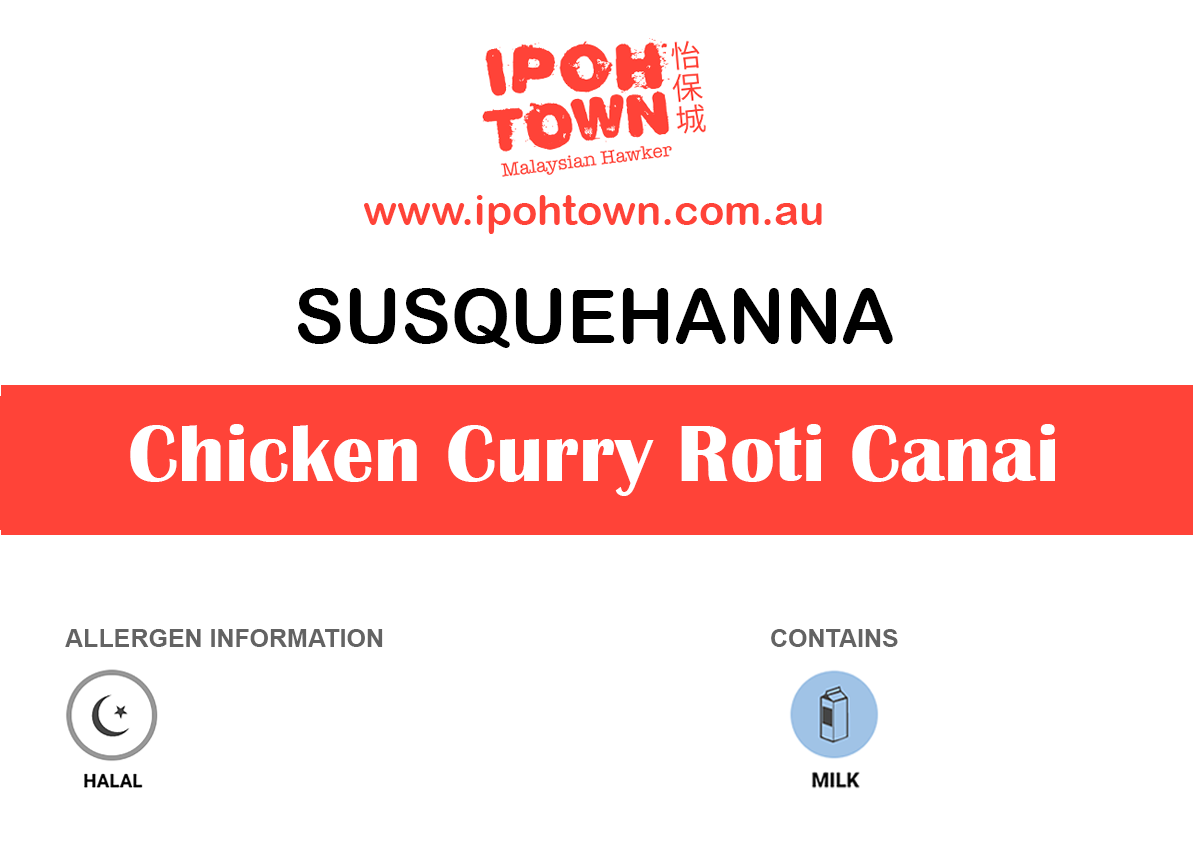
<style>
.page{position:relative;width:1193px;height:850px;background:#ffffff}
.page>*{position:absolute;margin:0}
.t1{font:41.7px "ArialRoundedMTBold";color:#ff4338}
.t2{font:75px "ArialRoundedMTBold";color:#000000}
.t3{font:83.3px "BritannicBold";color:#ffffff}
.t4{font:25px "Arial-BoldMT";color:#636363}
</style>
<div class="page">
<p class="t1" style="left:364px;top:195px;width:458px;height:39px">www.ipohtown.com.au</p>
<p class="t2" style="left:298px;top:288px;width:595px;height:60px">SUSQUEHANNA</p>
<p class="t3" style="left:130px;top:424px;width:925px;height:72px">Chicken Curry Roti Canai</p>
<p class="t4" style="left:65px;top:629px;width:318px;height:18px">ALLERGEN INFORMATION</p>
<p class="t4" style="left:771px;top:629px;width:127px;height:18px">CONTAINS</p>
</div>
